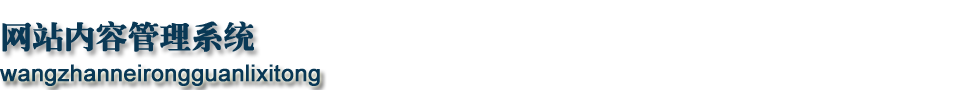
<style>
.page{position:relative;width:960px;height:90px;background:#ffffff}
.page>*{position:absolute;margin:0}
.t1{font:31px "JQLaoSongJT";color:#093855;font-weight:bold}
.t2{font:23px "ArialMT";color:#093855;font-weight:bold}
</style>
<div class="page">
<p class="t1" style="left:2px;top:21px;width:252px;height:31px">网站内容管理系统</p>
<p class="t2" style="left:0px;top:64px;width:320px;height:22px">wangzhanneirongguanlixitong</p>
</div>
